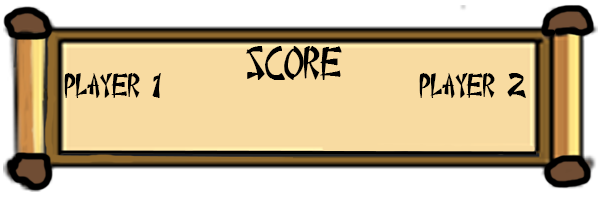
<style>
.page{position:relative;width:600px;height:200px;background:#f8dba1}
.page>*{position:absolute;margin:0}
.t1{font:33.3px "ChineseTakeaway";color:#000000}
.t2{font:25px "ChineseTakeaway";color:#000000}
</style>
<div class="page">
<p class="t1" style="left:246px;top:46px;width:96px;height:34px">Score</p>
<p class="t2" style="left:64px;top:73px;width:97px;height:25px">player 1</p>
<p class="t2" style="left:419px;top:73px;width:107px;height:25px">player 2</p>
</div>
